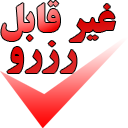
<style>
.page{position:relative;width:128px;height:128px;background:#ffffff}
.page>*{position:absolute;margin:0}
.t1{font:39.9px/30.6px "BTitrBold"}
</style>
<div class="page">
<p class="t1" style="left:1px;top:1px;width:115px;height:72px">غیر قابل <br>     رزرو</p>
</div>
